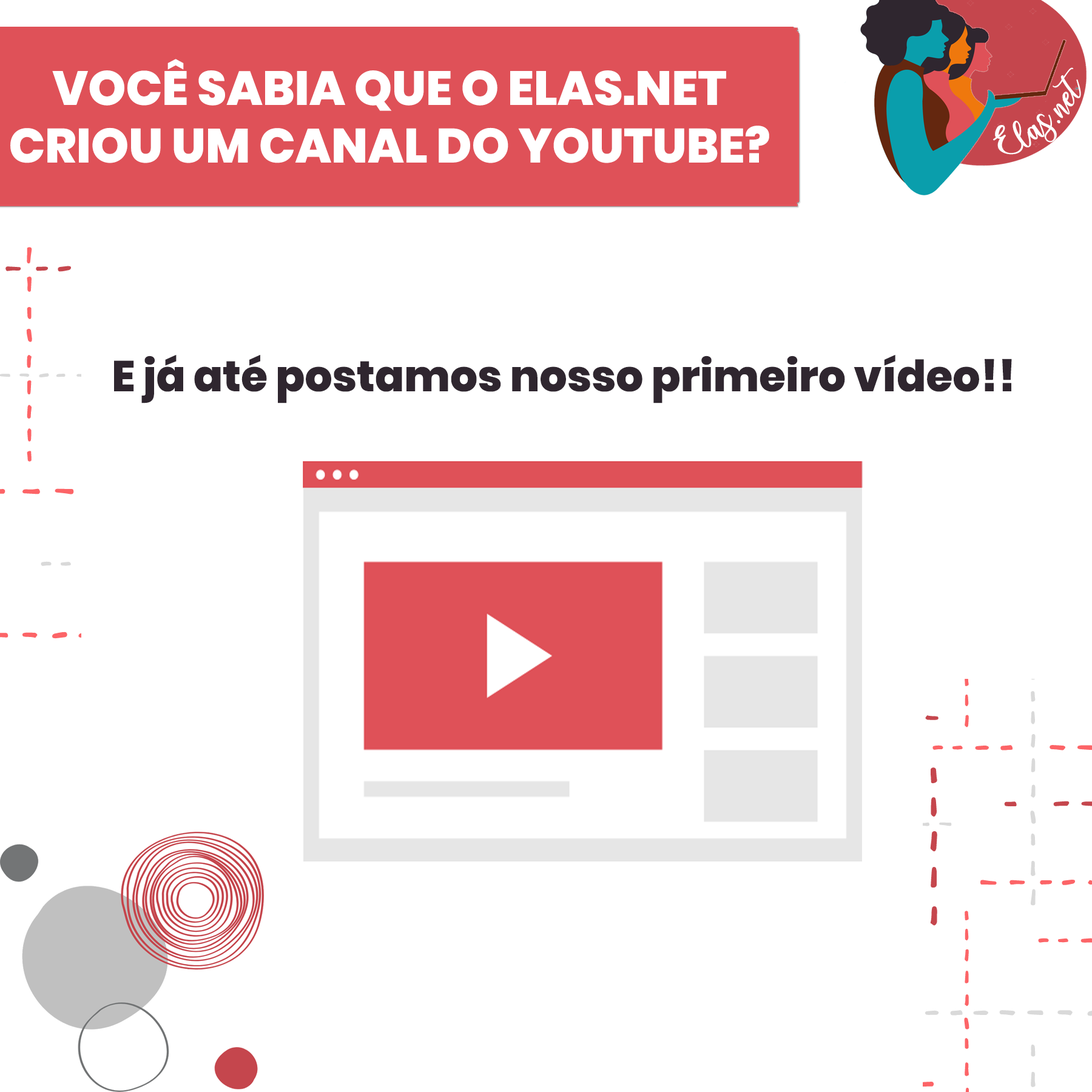
<style>
.page{position:relative;width:1092px;height:1092px;background:#ffffff}
.page>*{position:absolute;margin:0}
.t1{font:47.9px "Poppins-ExtraBold";color:#ffffff;text-transform:uppercase}
.t2{font:25px "charlinda-Regular";color:#ffffff;scale:1.18 1}
.t3{font:43.1px "Poppins-ExtraBold";color:#2f262f}
</style>
<div class="page">
<p class="t1" style="left:10px;top:59px;width:759px;height:104px;text-align:center">Você sabia que o Elas.net<br>criou um canal do youtube?</p>
<p class="t2" style="left:993px;top:67px;width:88px;height:88px;rotate:-42deg">Elas.net</p>
<p class="t3" style="left:113px;top:355px;width:899px;height:48px">E já até postamos nosso primeiro vídeo!!</p>
</div>
